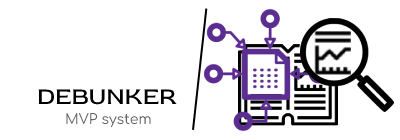
<style>
.page{position:relative;width:400px;height:140px;background:#ffffff}
.page>*{position:absolute;margin:0}
.t1{font:24px "RedRose-Regular";color:#000000}
.t2{font:14px "Comfortaa-Regular";color:#616161}
</style>
<div class="page">
<p class="t1" style="left:38px;top:89px;width:139px;height:16px">DEBUNKER</p>
<p class="t2" style="left:66px;top:113px;width:85px;height:15px">MVP system</p>
</div>
